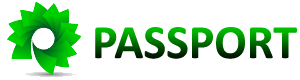
<style>
.page{position:relative;width:300px;height:80px;background:#ffffff}
.page>*{position:absolute;margin:0}
.t1{font:48px "Calibri-Bold"}
</style>
<div class="page">
<p class="t1" style="left:95px;top:27px;width:202px;height:32px">PASSPORT</p>
</div>
